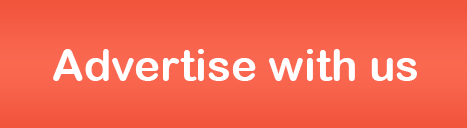
<style>
.page{position:relative;width:467px;height:128px}
.page>*{position:absolute;margin:0}
.t1{font:44px "ArialRoundedMTBold";color:#ffffff}
</style>
<div class="page">
<p class="t1" style="left:53px;top:49px;width:364px;height:32px">Advertise with us</p>
</div>
